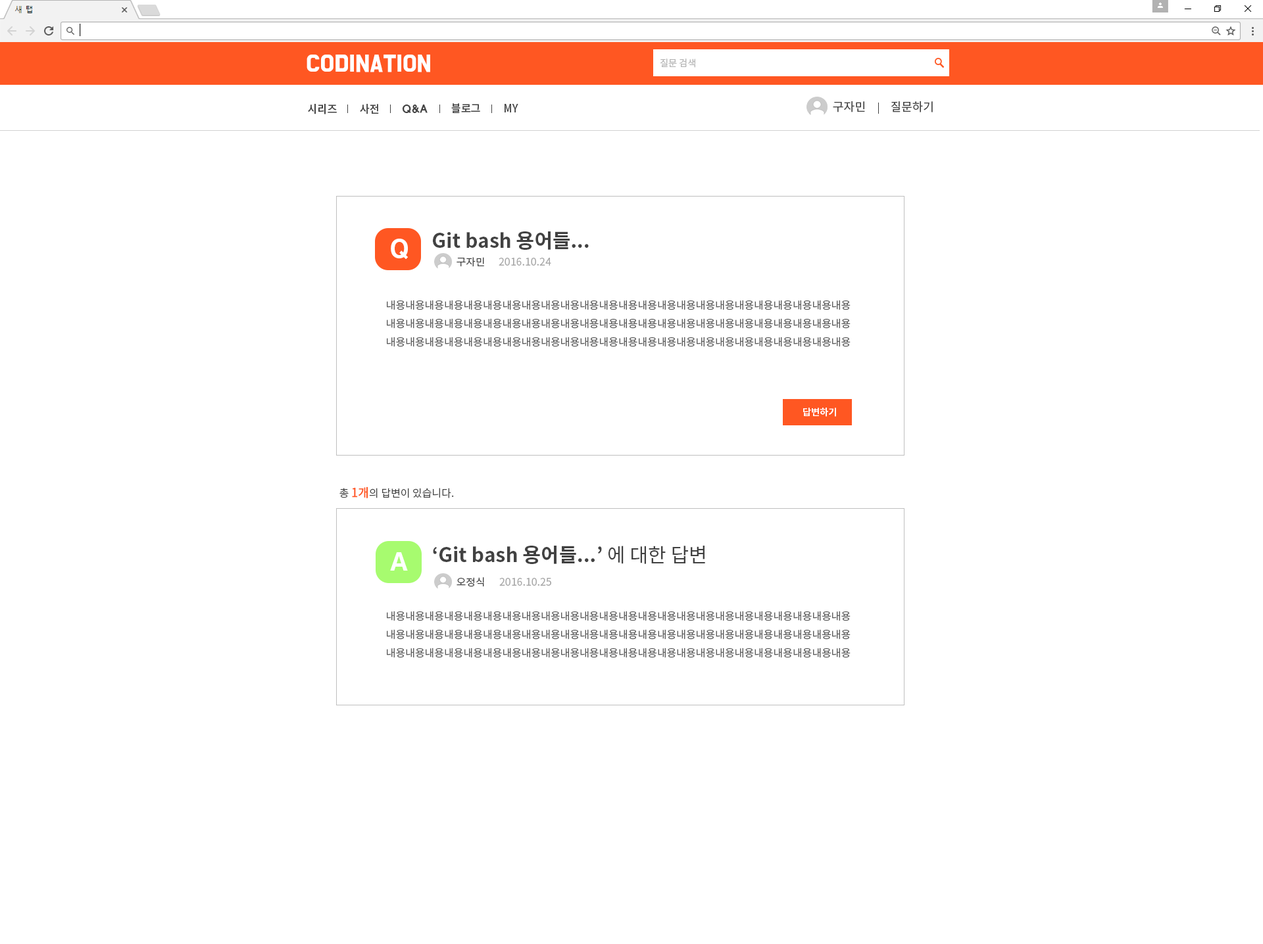
<style>
.page{position:relative;width:1263px;height:944px;background:#ffffff}
.page>*{position:absolute;margin:0}
.t1{font:19.7px "BMDoHyeon";color:#ffffff;font-weight:bold}
.t2{font:9.2px "NotoSansCJKkr-DemiLight";color:#b5b5b5}
.t3{font:11.8px "NotoSansCJKkr-Regular";color:#424242}
.t4{font:10.9px "NotoSansCJKkr-Medium";letter-spacing:-0.01em;color:#424242}
.t5{font:10.9px "HYwulB";letter-spacing:-0.025em;color:#424242}
.t6{font:19.7px "NotoSansCJKkr-Bold";color:#424242}
.t7{font:24px "HYgtrE";color:#ffffff}
.t8{font:9.9px "NotoSansCJKkr-Regular";color:#424242;scale:1.05 1}
.t9{font:10.5px "NotoSansCJKkr-Regular";color:#a7a7a7}
.t10{font:10.5px "NotoSansCJKkr-Regular";color:#5b5b5b}
.t11{font:9.4px "NotoSansCJKkr-Bold";color:#ffffff}
.t12{font:10.5px "NotoSansCJKkr-DemiLight";color:#424242}
.t13{font:11.8px "NotoSansCJKkr-DemiLight";color:#ff5722;font-weight:bold}
.t14{font:19.7px "NotoSansCJKkr-Regular";color:#424242}
</style>
<div class="page">
<p class="t1" style="left:306px;top:55px;width:124px;height:17px">CODINATION</p>
<p class="t2" style="left:660px;top:59px;width:35px;height:9px">질문 검색</p>
<p class="t3" style="left:833px;top:101px;width:32px;height:11px">구자민</p>
<p class="t3" style="left:891px;top:101px;width:42px;height:11px">질문하기</p>
<p class="t4" style="left:308px;top:104px;width:29px;height:10px">시리즈</p>
<p class="t4" style="left:360px;top:104px;width:19px;height:10px">사전</p>
<p class="t5" style="left:402px;top:105px;width:25px;height:8px">Q&amp;A</p>
<p class="t4" style="left:451px;top:103px;width:29px;height:10px">블로그</p>
<p class="t4" style="left:504px;top:104px;width:14px;height:8px">MY</p>
<p class="t6" style="left:433px;top:231px;width:156px;height:19px">Git bash 용어들...</p>
<p class="t7" style="left:391px;top:239px;width:17px;height:20px">Q</p>
<p class="t8" style="left:456px;top:257px;width:28px;height:10px">구자민</p>
<p class="t9" style="left:498px;top:258px;width:53px;height:8px">2016.10.24</p>
<p class="t10" style="left:387px;top:300px;width:463px;height:47px">내용내용내용내용내용내용내용내용내용내용내용내용내용내용내용내용내용내용내용내용내용내용내용내용<br>내용내용내용내용내용내용내용내용내용내용내용내용내용내용내용내용내용내용내용내용내용내용내용내용<br>내용내용내용내용내용내용내용내용내용내용내용내용내용내용내용내용내용내용내용내용내용내용내용내용</p>
<p class="t11" style="left:803px;top:408px;width:33px;height:9px">답변하기</p>
<p class="t12" style="left:339px;top:487px;width:115px;height:11px">총 <span class="t13">1개</span>의 답변이 있습니다.</p>
<p class="t6" style="left:433px;top:546px;width:272px;height:18px">‘Git bash 용어들...’ <span class="t14">에 대한 답변</span></p>
<p class="t7" style="left:390px;top:552px;width:18px;height:19px">A</p>
<p class="t8" style="left:456px;top:577px;width:28px;height:10px">오정식</p>
<p class="t9" style="left:499px;top:578px;width:52px;height:8px">2016.10.25</p>
<p class="t10" style="left:387px;top:611px;width:463px;height:47px">내용내용내용내용내용내용내용내용내용내용내용내용내용내용내용내용내용내용내용내용내용내용내용내용<br>내용내용내용내용내용내용내용내용내용내용내용내용내용내용내용내용내용내용내용내용내용내용내용내용<br>내용내용내용내용내용내용내용내용내용내용내용내용내용내용내용내용내용내용내용내용내용내용내용내용</p>
</div>
